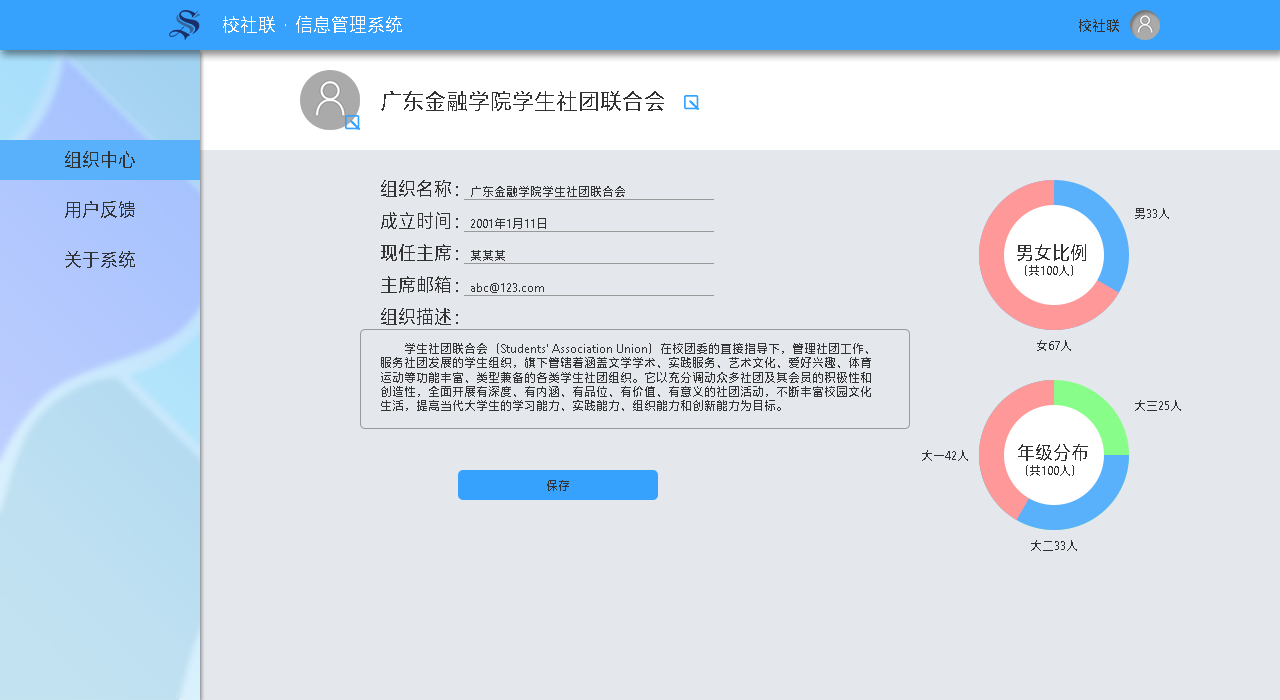
<style>
.page{position:relative;width:1280px;height:700px;background:#e4e8ec}
.page>*{position:absolute;margin:0}
.t1{font:18px "MicrosoftYaHei";color:#ffffff}
.t2{font:14px "MicrosoftYaHei";color:#333333}
.t3{font:22px "MicrosoftYaHei";color:#333333}
.t4{font:18px "MicrosoftYaHei";color:#333333}
.t5{font:12px "MicrosoftYaHei";color:#333333}
</style>
<div class="page">
<p class="t1" style="left:223px;top:16px;width:179px;height:17px">校社联 · 信息管理系统</p>
<p class="t2" style="left:1079px;top:19px;width:40px;height:13px">校社联</p>
<p class="t3" style="left:381px;top:91px;width:283px;height:20px">广东金融学院学生社团联合会</p>
<p class="t4" style="left:65px;top:151px;width:70px;height:17px">组织中心</p>
<p class="t5" style="left:381px;top:180px;width:244px;height:17px"><span class="t4">组织名称：</span>广东金融学院学生社团联合会</p>
<p class="t4" style="left:65px;top:201px;width:70px;height:17px">用户反馈</p>
<p class="t5" style="left:1135px;top:208px;width:34px;height:11px">男33人</p>
<p class="t5" style="left:381px;top:212px;width:165px;height:17px"><span class="t4">成立时间：</span>2001年1月11日</p>
<p class="t4" style="left:381px;top:244px;width:124px;height:17px">现任主席：<span class="t5">某某某</span></p>
<p class="t5" style="left:1017px;top:244px;width:69px;height:32px"><span class="t4">男女比例<br></span>（共100人）</p>
<p class="t4" style="left:65px;top:251px;width:70px;height:17px">关于系统</p>
<p class="t5" style="left:381px;top:276px;width:163px;height:17px"><span class="t4">主席邮箱：</span>abc@123.com</p>
<p class="t5" style="left:381px;top:308px;width:490px;height:103px"><span class="t4">组织描述：<br></span>         <br>        学生社团联合会（Students' Association Union）在校团委的直接指导下，管理社团工作、<br>服务社团发展的学生组织，旗下管辖着涵盖文学学术、实践服务、艺术文化、爱好兴趣、体育<br>运动等功能丰富、类型兼备的各类学生社团组织。它以充分调动众多社团及其会员的积极性和<br>创造性，全面开展有深度、有内涵、有品位、有价值、有意义的社团活动，不断丰富校园文化<br>生活，提高当代大学生的学习能力、实践能力、组织能力和创新能力为目标。</p>
<p class="t5" style="left:1037px;top:340px;width:34px;height:11px">女67人</p>
<p class="t5" style="left:1135px;top:400px;width:46px;height:11px">大三25人</p>
<p class="t5" style="left:1018px;top:444px;width:70px;height:32px"><span class="t4">年级分布<br></span>（共100人）</p>
<p class="t5" style="left:922px;top:450px;width:46px;height:11px">大一42人</p>
<p class="t5" style="left:547px;top:480px;width:22px;height:11px">保存</p>
<p class="t5" style="left:1031px;top:540px;width:46px;height:11px">大二33人</p>
</div>
